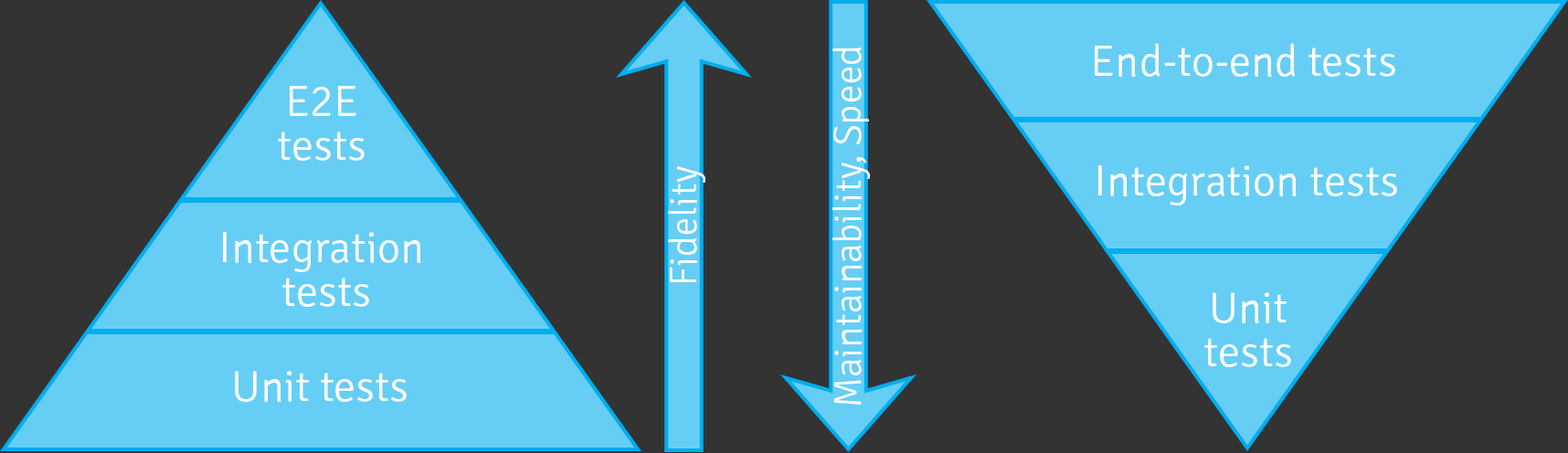
<style>
.page{position:relative;width:1568px;height:453px;background:#333333}
.page>*{position:absolute;margin:0}
.t1{font:38.4px "Signika-Light";color:#ffffff}
.t2{font:43.9px "Signika-Light";color:#ffffff}
.t3{font:43.9px/43.9px "Signika-Light";color:#ffffff}
</style>
<div class="page">
<p class="t1" style="left:832px;top:47px;width:38px;height:358px;rotate:-90deg">Maintainability, Speed</p>
<p class="t2" style="left:1095px;top:43px;width:300px;height:34px">End-to-end tests</p>
<p class="t3" style="left:278px;top:86px;width:87px;height:75px;text-align:center">E2E<br>tests</p>
<p class="t1" style="left:668px;top:166px;width:37px;height:116px;rotate:-90deg">Fidelity</p>
<p class="t2" style="left:1098px;top:165px;width:299px;height:41px">Integration tests</p>
<p class="t3" style="left:223px;top:232px;width:198px;height:75px;text-align:center">Integration <br>tests</p>
<p class="t3" style="left:1204px;top:292px;width:87px;height:75px;text-align:center">Unit<br>tests</p>
<p class="t2" style="left:235px;top:371px;width:172px;height:31px">Unit tests</p>
</div>
